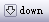
<style>
.page{position:relative;width:49px;height:22px}
.page>*{position:absolute;margin:0}
.t1{font:12px "NSimSun";color:#050000}
</style>
<div class="page">
<p class="t1" style="left:20px;top:6px;width:23px;height:8px">down</p>
</div>
